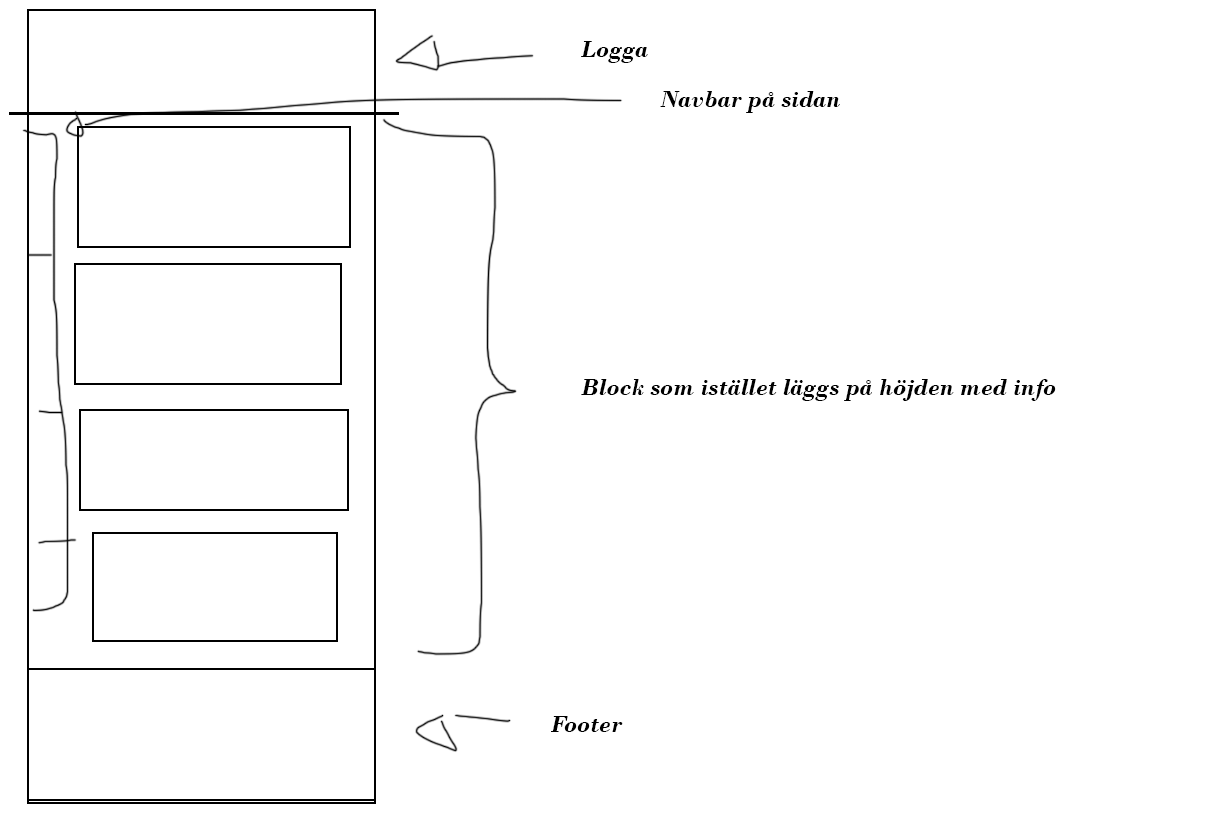
<style>
.page{position:relative;width:1224px;height:816px;background:#ffffff}
.page>*{position:absolute;margin:0}
.t1{font:24px "BodoniMT-BoldItalic";color:#000000}
</style>
<div class="page">
<p class="t1" style="left:581px;top:41px;width:67px;height:22px">Logga</p>
<p class="t1" style="left:660px;top:91px;width:180px;height:22px">Navbar på sidan</p>
<p class="t1" style="left:581px;top:379px;width:475px;height:22px">Block som istället läggs på höjden med info</p>
<p class="t1" style="left:551px;top:716px;width:72px;height:16px">Footer</p>
</div>
